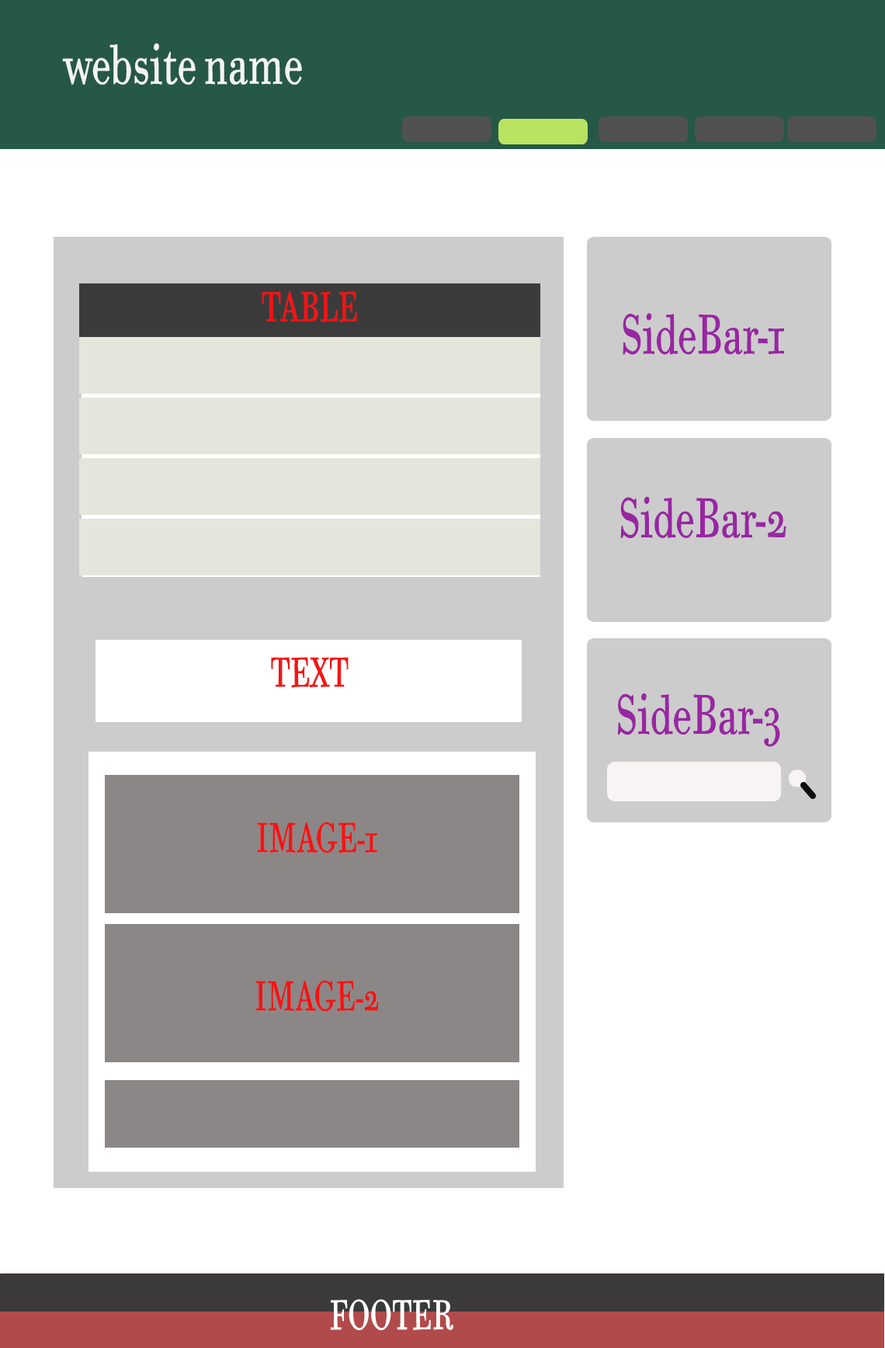
<style>
.page{position:relative;width:885px;height:1348px;background:#ffffff}
.page>*{position:absolute;margin:0}
.t1{font:55.9px "BodoniSixOSITCTTBook";color:#f3f3f3;scale:0.67 1}
.t2{font:41.9px "BodoniSixOSITCTTBook";color:#f51313;scale:0.67 1}
.t3{font:55.9px "BodoniSixOSITCTTBook";color:#9826a2;scale:0.67 1}
.t4{font:41.9px "BodoniSixOSITCTTBook";color:#ffffff;scale:0.67 1}
</style>
<div class="page">
<p class="t1" style="left:62px;top:43px;width:240px;height:42px">website name</p>
<p class="t2" style="left:262px;top:291px;width:95px;height:31px">TABLE</p>
<p class="t3" style="left:623px;top:313px;width:161px;height:42px">SideBar-1</p>
<p class="t3" style="left:620px;top:496px;width:166px;height:42px">SideBar-2</p>
<p class="t2" style="left:271px;top:657px;width:78px;height:31px">TEXT</p>
<p class="t3" style="left:618px;top:692px;width:162px;height:55px">SideBar-3</p>
<p class="t2" style="left:257px;top:822px;width:120px;height:31px">IMAGE-1</p>
<p class="t2" style="left:255px;top:980px;width:124px;height:31px">IMAGE-2</p>
<p class="t4" style="left:331px;top:1299px;width:122px;height:31px">FOOTER</p>
</div>
